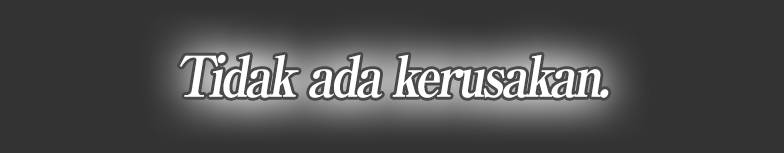
<style>
.page{position:relative;width:784px;height:153px;background:#333333}
.page>*{position:absolute;margin:0}
.t1{font:56px "RyuminPro-ExBold";letter-spacing:-0.08em;color:#ffffff;font-style:italic;scale:0.9 1}
</style>
<div class="page">
<p class="t1" style="left:179px;top:54px;width:430px;height:44px">Tidak ada kerusakan.</p>
</div>
